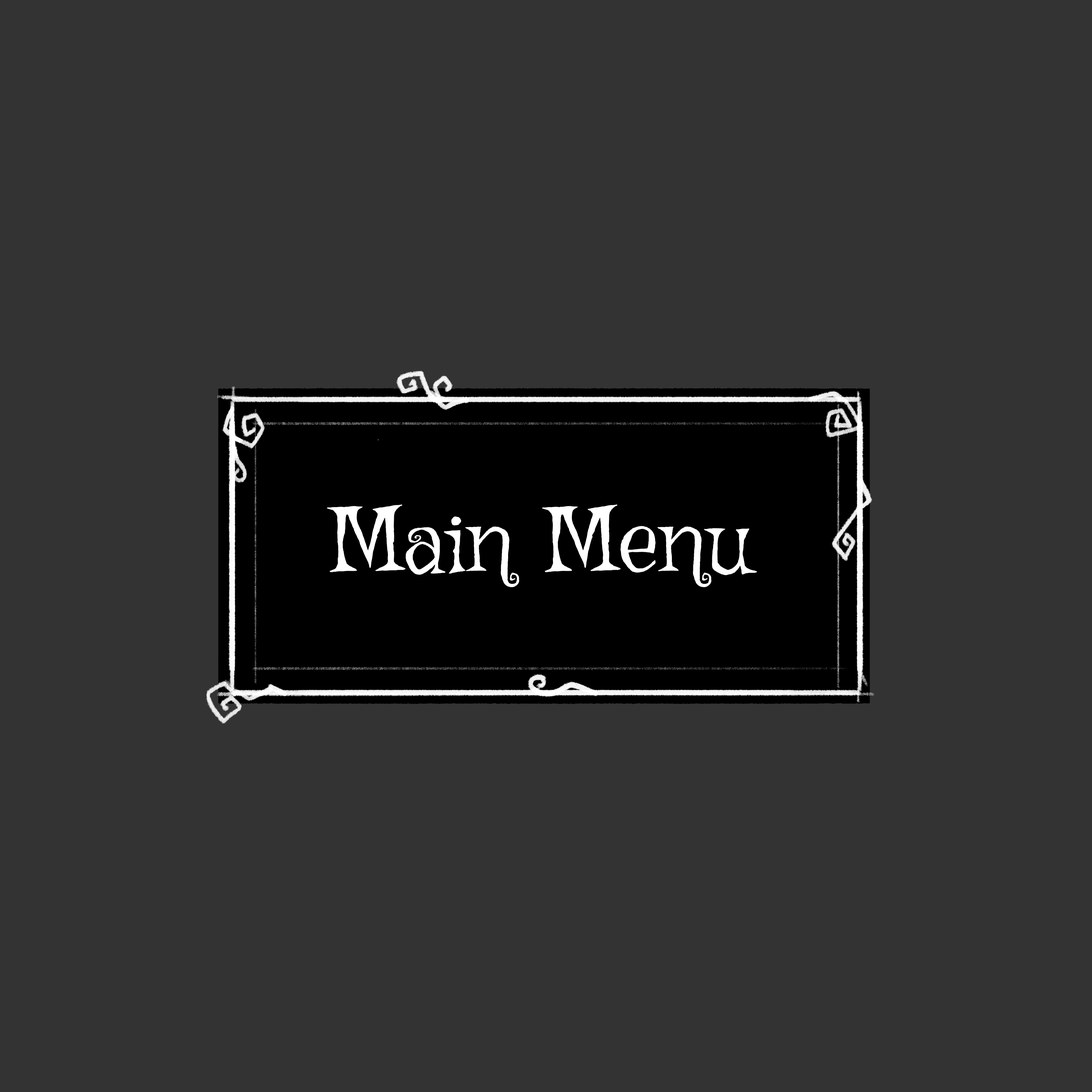
<style>
.page{position:relative;width:1092px;height:1092px;background:#333333}
.page>*{position:absolute;margin:0}
.t1{font:91px "Griffy-Regular";color:#ffffff}
</style>
<div class="page">
<p class="t1" style="left:327px;top:504px;width:430px;height:83px">Main Menu</p>
</div>
